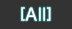
<style>
.page{position:relative;width:72px;height:29px;background:#333333}
.page>*{position:absolute;margin:0}
.t1{font:18px "FutoGoB101Pr5-Bold";color:#ffffff}
.t2{font:14.9px "FutoGoB101Pr5-Bold";color:#ffffff;scale:1.2 1}
</style>
<div class="page">
<p class="t1" style="left:21px;top:7px;width:30px;height:14px"><span class="t2">[</span>All<span class="t2">]</span></p>
</div>
